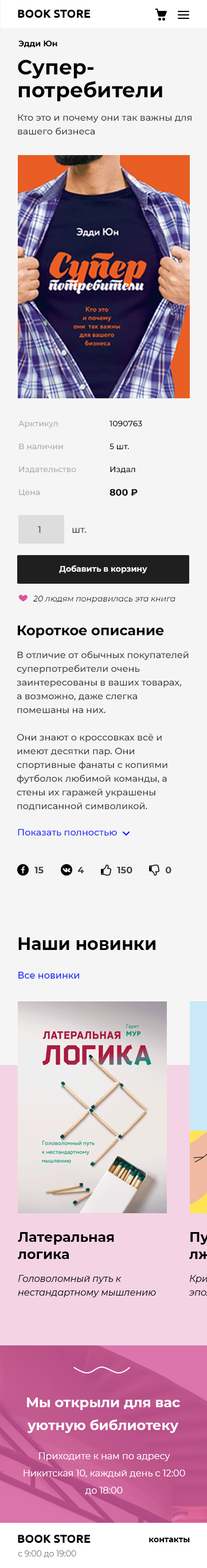
<style>
.page{position:relative;width:207px;height:1568px;background:#f5f5f5}
.page>*{position:absolute;margin:0}
.t1{font:8px "Montserrat-Bold";color:#000000}
.t2{font:20.6px/22.9px "Montserrat-Bold";color:#000000}
.t3{font:9.2px/13.7px "Montserrat-Medium";color:#3c3c3c}
.t4{font:8px "Montserrat-Medium";color:#ababab}
.t5{font:8px "Montserrat-Medium";color:#000000}
.t6{font:9.2px "Montserrat-Bold";color:#000000}
.t7{font:9.2px "Montserrat-Medium";color:#3c3c3c}
.t8{font:8px "Montserrat-Bold";color:#ffffff}
.t9{font:8px "Montserrat-Italic";color:#000000}
.t10{font:13.7px "Montserrat-Bold";color:#000000}
.t11{font:9.2px "Montserrat-Medium";color:#1a1ff7}
.t12{font:9.2px "Montserrat-Bold";color:#3c3c3c}
.t13{font:17.2px "Montserrat-Bold";color:#000000}
.t14{font:13.7px/17.2px "Montserrat-Bold";color:#000000}
.t15{font:9.2px/13.7px "Montserrat-Italic";color:#000000}
.t16{font:13.7px/22.9px "Montserrat-Bold";color:#ffffff}
.t17{font:9.2px/17.2px "Montserrat-Regular";color:#ffffff}
.t18{font:8px "Montserrat-Regular";color:#828282}
</style>
<div class="page">
<p class="t1" style="left:18px;top:40px;width:39px;height:7px">Эдди Юн</p>
<p class="t2" style="left:18px;top:60px;width:144px;height:41px">Супер-<br>потребители</p>
<p class="t3" style="left:18px;top:114px;width:173px;height:21px">Кто это и почему они так важны для вашего бизнеса</p>
<p class="t4" style="left:18px;top:421px;width:40px;height:7px">Арктикул</p>
<p class="t5" style="left:109px;top:421px;width:33px;height:5px">1090763</p>
<p class="t4" style="left:19px;top:444px;width:44px;height:5px">В наличии</p>
<p class="t5" style="left:109px;top:444px;width:20px;height:5px">5 шт.</p>
<p class="t4" style="left:19px;top:466px;width:57px;height:7px">Издательство</p>
<p class="t5" style="left:110px;top:466px;width:25px;height:7px">Издал</p>
<p class="t4" style="left:19px;top:489px;width:20px;height:8px">Цена</p>
<p class="t6" style="left:109px;top:489px;width:28px;height:7px">800 ₽</p>
<p class="t7" style="left:38px;top:526px;width:3px;height:7px">1</p>
<p class="t7" style="left:72px;top:528px;width:14px;height:5px">шт.</p>
<p class="t8" style="left:59px;top:565px;width:88px;height:8px">Добавить в корзину</p>
<p class="t9" style="left:33px;top:596px;width:142px;height:7px">20 людям понравилась эта книга</p>
<p class="t10" style="left:18px;top:625px;width:146px;height:13px">Короткое описание</p>
<p class="t3" style="left:17px;top:651px;width:171px;height:159px">В отличие от обычных покупателей суперпотребители очень заинтересованы в ваших товарах, а возможно, даже слегка помешаны на них.<br><br>Они знают о кроссовках всё и имеют десятки пар. Они спортивные фанаты c копиями футболок любимой команды, а стены их гаражей украшены подписанной символикой.</p>
<p class="t11" style="left:18px;top:829px;width:99px;height:7px">Показать полностью</p>
<p class="t12" style="left:34px;top:866px;width:9px;height:8px">15</p>
<p class="t12" style="left:77px;top:866px;width:7px;height:7px">4</p>
<p class="t12" style="left:117px;top:866px;width:15px;height:8px">150</p>
<p class="t12" style="left:165px;top:866px;width:6px;height:8px">0</p>
<p class="t13" style="left:18px;top:937px;width:137px;height:13px">Наши новинки</p>
<p class="t11" style="left:18px;top:972px;width:61px;height:7px">Все новинки</p>
<p class="t14" style="left:18px;top:1232px;width:96px;height:27px">Латеральная логика</p>
<p class="t15" style="left:18px;top:1275px;width:138px;height:22px">Головоломный путь к нестандартному мышлению</p>
<p class="t16" style="left:27px;top:1397px;width:153px;height:36px;text-align:center">Мы открыли для вас уютную библиотеку</p>
<p class="t17" style="left:23px;top:1452px;width:162px;height:43px;text-align:center">Приходите к нам по адресу Никитская 10, каждый день с 12:00 до 18:00</p>
<p class="t1" style="left:149px;top:1538px;width:40px;height:4px">контакты</p>
<p class="t18" style="left:18px;top:1550px;width:58px;height:8px">с 9:00 до 19:00</p>
</div>
